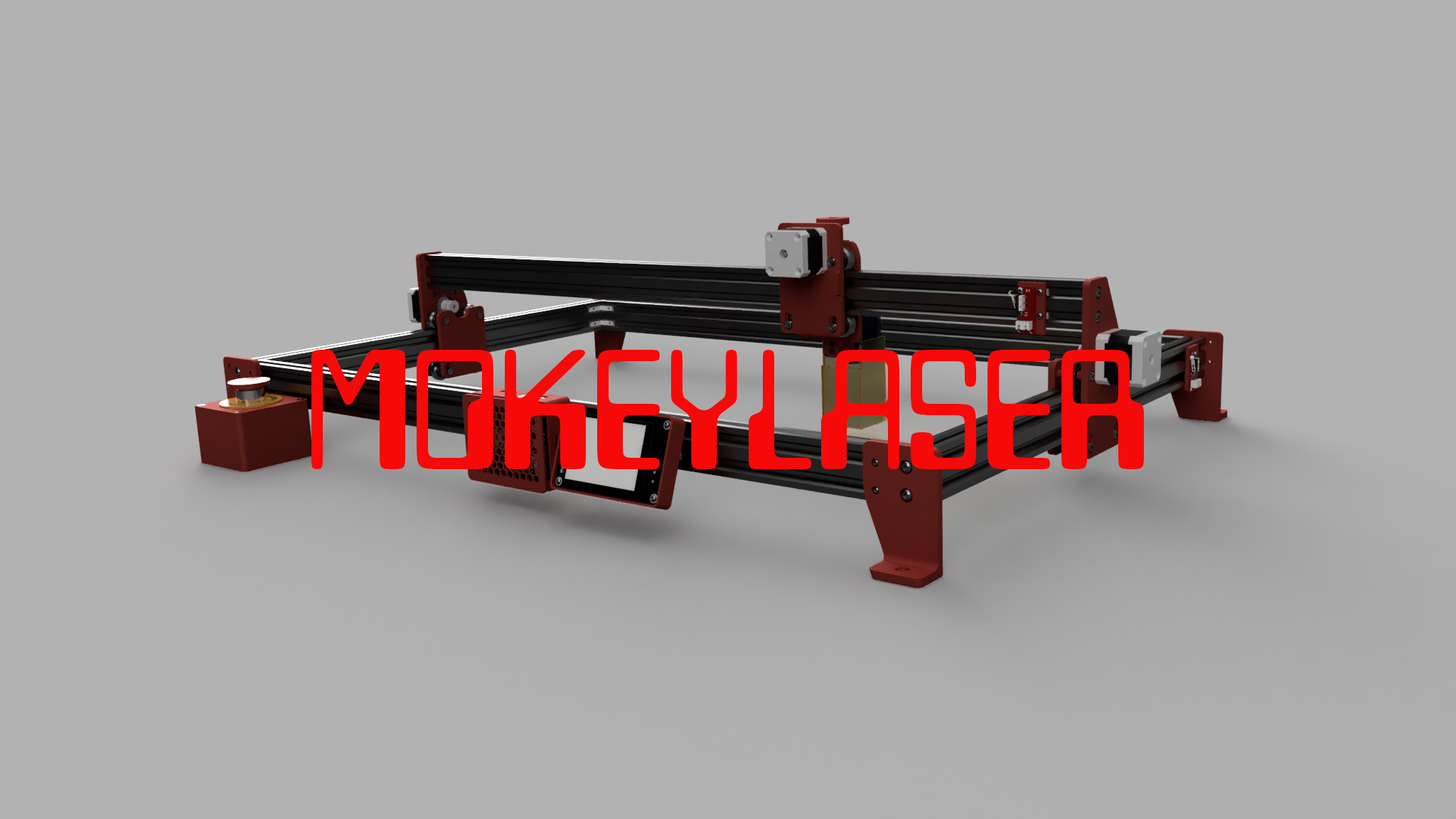
<style>
.page{position:relative;width:1456px;height:819px;background:#b2b2b2}
.page>*{position:absolute;margin:0}
.t1{font:142.2px "LazenbyComputer-Smooth";color:#f60909}
</style>
<div class="page">
<p class="t1" style="left:311px;top:350px;width:833px;height:119px">mokeylaser</p>
</div>
